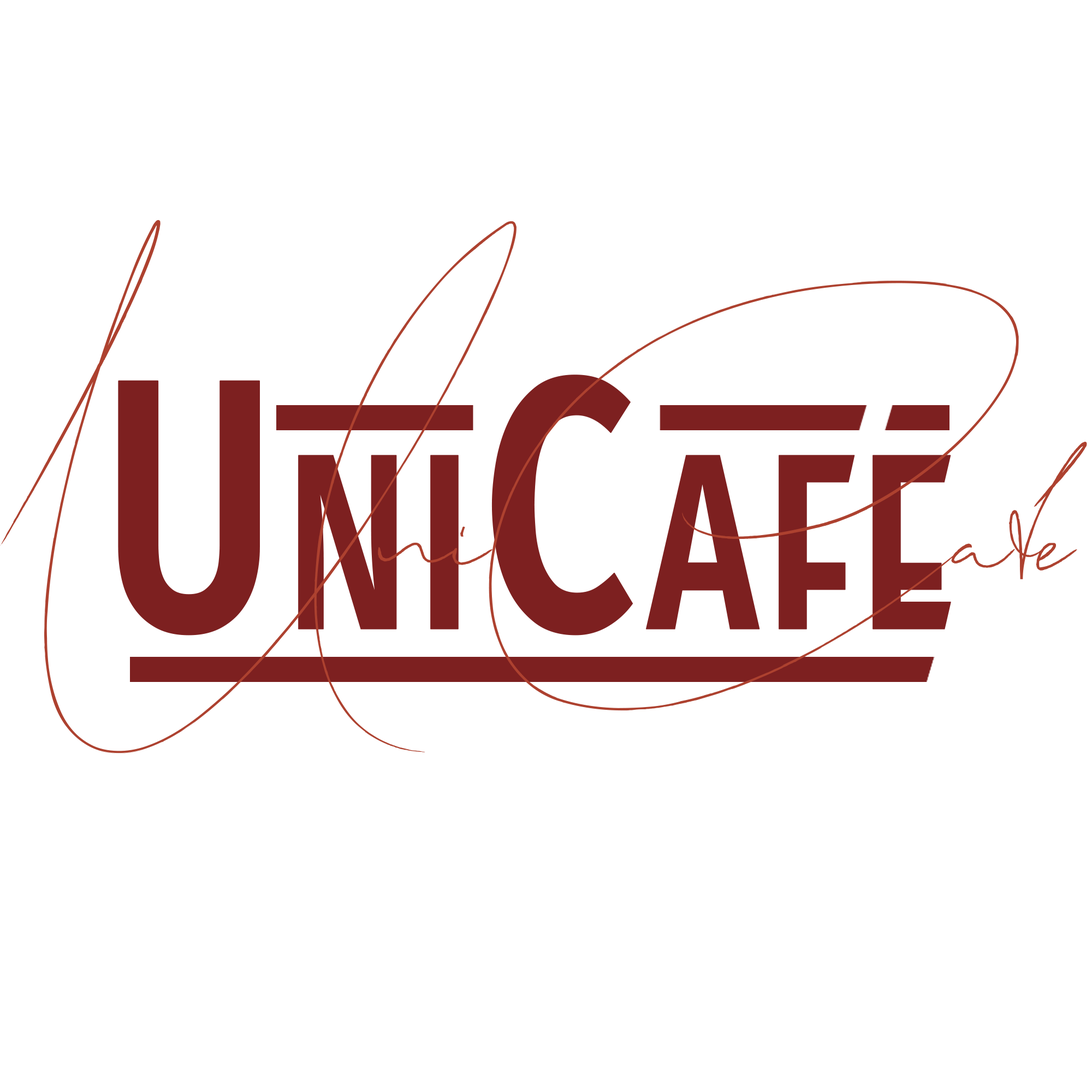
<style>
.page{position:relative;width:1092px;height:1092px;background:#ffffff}
.page>*{position:absolute;margin:0}
.t1{font:385.9px "LovtonySans";color:#7d2020;font-variant:small-caps;font-weight:bold}
</style>
<div class="page">
<p class="t1" style="left:118px;top:375px;width:833px;height:261px">UniCafe</p>
</div>
